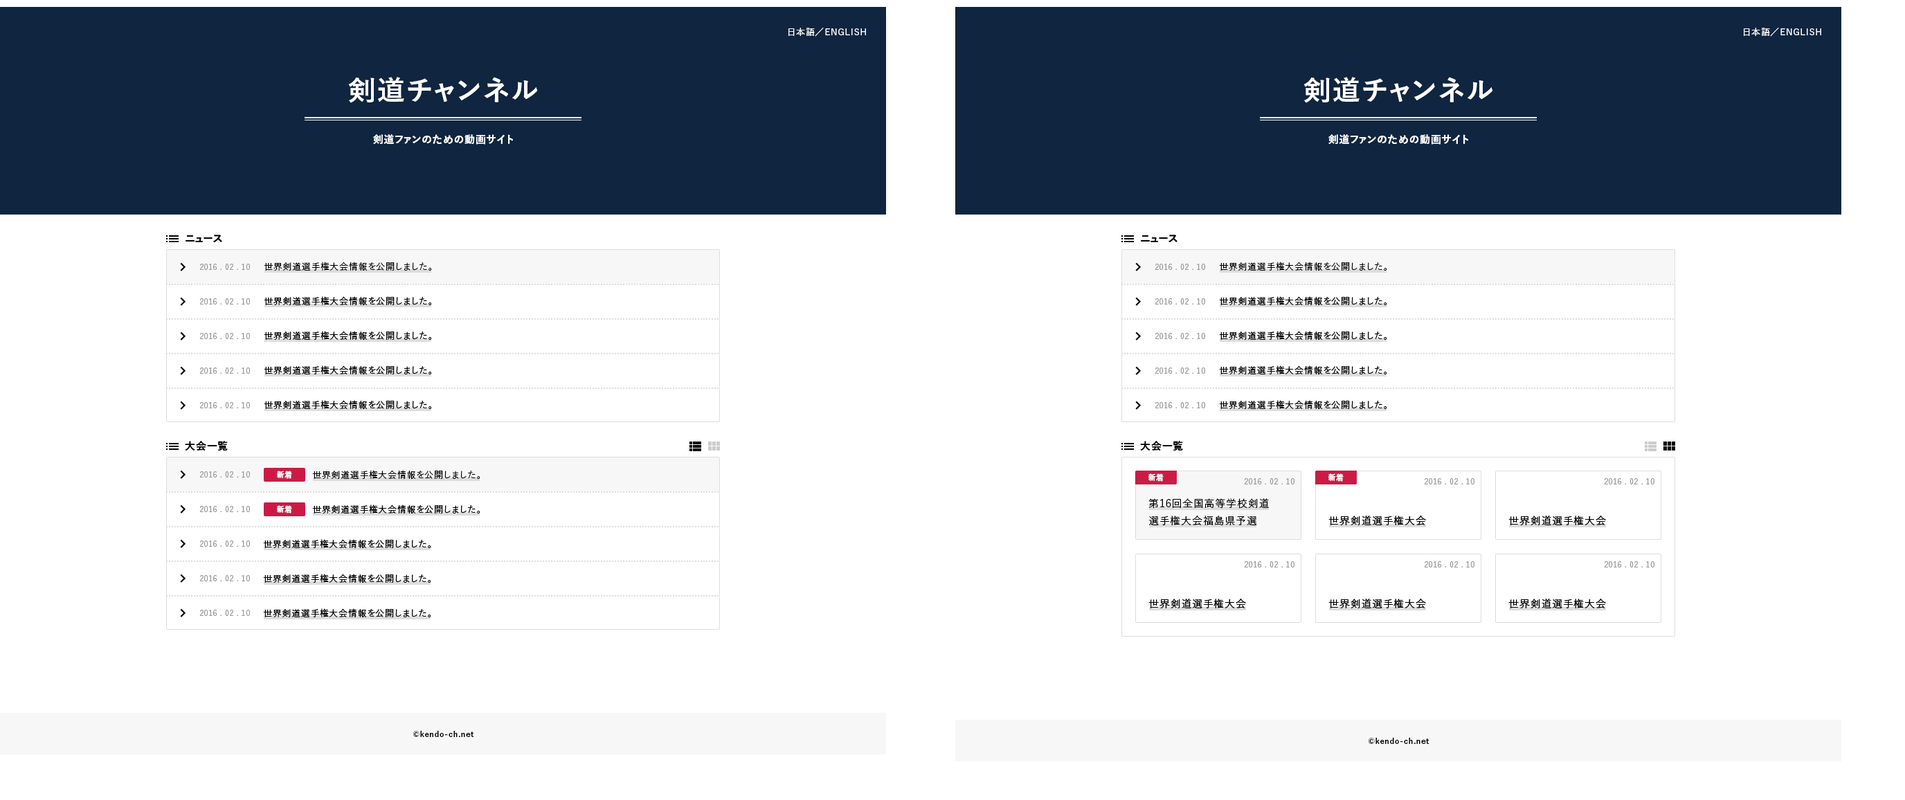
<style>
.page{position:relative;width:1905px;height:800px;background:#ffffff}
.page>*{position:absolute;margin:0}
.t1{font:9px "YuGo-Medium";letter-spacing:0.05em;color:#ffffff}
.t2{font:27.7px "YuGo-Bold";letter-spacing:0.05em;color:#ffffff}
.t3{font:10.4px "YuGo-Bold";letter-spacing:0.05em;color:#ffffff}
.t4{font:10.4px "YuGo-Bold";letter-spacing:0.05em;color:#000000}
.t5{font:7.6px "YuGo-Medium";letter-spacing:0.05em;color:#999999}
.t6{font:9px "YuGo-Medium";letter-spacing:0.05em;color:#000000}
.t7{font:7.6px "YuGo-Bold";letter-spacing:0.05em;color:#ffffff}
.t8{font:10.4px/17.3px "YuGo-Medium";letter-spacing:0.05em;color:#000000}
.t9{font:10.4px "YuGo-Medium";letter-spacing:0.05em;color:#000000}
.t10{font:7.6px "YuGo-Bold";letter-spacing:0.05em;color:#000000}
</style>
<div class="page">
<p class="t1" style="left:789px;top:28px;width:77px;height:9px">日本語／ENGLISH</p>
<p class="t1" style="left:1744px;top:28px;width:77px;height:9px">日本語／ENGLISH</p>
<p class="t2" style="left:348px;top:77px;width:190px;height:26px">剣道チャンネル</p>
<p class="t2" style="left:1304px;top:77px;width:189px;height:26px">剣道チャンネル</p>
<p class="t3" style="left:373px;top:134px;width:140px;height:11px">剣道ファンのための動画サイト</p>
<p class="t3" style="left:1329px;top:134px;width:139px;height:11px">剣道ファンのための動画サイト</p>
<p class="t4" style="left:186px;top:235px;width:36px;height:7px">ニュース</p>
<p class="t4" style="left:1141px;top:235px;width:37px;height:7px">ニュース</p>
<p class="t5" style="left:199px;top:264px;width:51px;height:6px">2016 . 02 . 10</p>
<p class="t6" style="left:264px;top:262px;width:168px;height:9px">世界剣道選手権大会情報を公開しました。</p>
<p class="t5" style="left:1155px;top:264px;width:50px;height:6px">2016 . 02 . 10</p>
<p class="t6" style="left:1219px;top:262px;width:168px;height:9px">世界剣道選手権大会情報を公開しました。</p>
<p class="t5" style="left:199px;top:298px;width:51px;height:7px">2016 . 02 . 10</p>
<p class="t6" style="left:264px;top:296px;width:168px;height:9px">世界剣道選手権大会情報を公開しました。</p>
<p class="t5" style="left:1155px;top:298px;width:50px;height:7px">2016 . 02 . 10</p>
<p class="t6" style="left:1219px;top:296px;width:168px;height:9px">世界剣道選手権大会情報を公開しました。</p>
<p class="t5" style="left:199px;top:333px;width:51px;height:6px">2016 . 02 . 10</p>
<p class="t6" style="left:264px;top:331px;width:168px;height:9px">世界剣道選手権大会情報を公開しました。</p>
<p class="t5" style="left:1155px;top:333px;width:50px;height:6px">2016 . 02 . 10</p>
<p class="t6" style="left:1219px;top:331px;width:168px;height:9px">世界剣道選手権大会情報を公開しました。</p>
<p class="t6" style="left:264px;top:366px;width:168px;height:9px">世界剣道選手権大会情報を公開しました。</p>
<p class="t6" style="left:1219px;top:366px;width:168px;height:9px">世界剣道選手権大会情報を公開しました。</p>
<p class="t5" style="left:199px;top:368px;width:51px;height:6px">2016 . 02 . 10</p>
<p class="t5" style="left:1155px;top:368px;width:50px;height:6px">2016 . 02 . 10</p>
<p class="t6" style="left:264px;top:400px;width:168px;height:9px">世界剣道選手権大会情報を公開しました。</p>
<p class="t6" style="left:1219px;top:400px;width:168px;height:9px">世界剣道選手権大会情報を公開しました。</p>
<p class="t5" style="left:199px;top:402px;width:51px;height:6px">2016 . 02 . 10</p>
<p class="t5" style="left:1155px;top:402px;width:50px;height:6px">2016 . 02 . 10</p>
<p class="t4" style="left:185px;top:441px;width:43px;height:10px">大会一覧</p>
<p class="t4" style="left:1140px;top:441px;width:43px;height:10px">大会一覧</p>
<p class="t5" style="left:199px;top:471px;width:51px;height:7px">2016 . 02 . 10</p>
<p class="t7" style="left:277px;top:471px;width:15px;height:8px">新着</p>
<p class="t6" style="left:312px;top:470px;width:168px;height:9px">世界剣道選手権大会情報を公開しました。</p>
<p class="t7" style="left:1149px;top:474px;width:15px;height:8px">新着</p>
<p class="t7" style="left:1329px;top:474px;width:15px;height:8px">新着</p>
<p class="t5" style="left:1244px;top:478px;width:51px;height:7px">2016 . 02 . 10</p>
<p class="t5" style="left:1424px;top:478px;width:51px;height:7px">2016 . 02 . 10</p>
<p class="t5" style="left:1604px;top:478px;width:51px;height:7px">2016 . 02 . 10</p>
<p class="t5" style="left:199px;top:506px;width:51px;height:6px">2016 . 02 . 10</p>
<p class="t7" style="left:277px;top:505px;width:15px;height:9px">新着</p>
<p class="t6" style="left:312px;top:505px;width:168px;height:9px">世界剣道選手権大会情報を公開しました。</p>
<p class="t8" style="left:1149px;top:498px;width:121px;height:27px">第16回全国高等学校剣道<br>選手権大会福島県予選</p>
<p class="t9" style="left:1329px;top:516px;width:97px;height:9px">世界剣道選手権大会</p>
<p class="t9" style="left:1509px;top:516px;width:97px;height:9px">世界剣道選手権大会</p>
<p class="t5" style="left:199px;top:541px;width:51px;height:6px">2016 . 02 . 10</p>
<p class="t6" style="left:263px;top:539px;width:168px;height:9px">世界剣道選手権大会情報を公開しました。</p>
<p class="t5" style="left:1244px;top:561px;width:51px;height:7px">2016 . 02 . 10</p>
<p class="t5" style="left:1424px;top:561px;width:51px;height:7px">2016 . 02 . 10</p>
<p class="t5" style="left:1604px;top:561px;width:51px;height:7px">2016 . 02 . 10</p>
<p class="t5" style="left:199px;top:575px;width:51px;height:7px">2016 . 02 . 10</p>
<p class="t6" style="left:263px;top:574px;width:168px;height:9px">世界剣道選手権大会情報を公開しました。</p>
<p class="t9" style="left:1149px;top:599px;width:97px;height:10px">世界剣道選手権大会</p>
<p class="t9" style="left:1329px;top:599px;width:97px;height:10px">世界剣道選手権大会</p>
<p class="t9" style="left:1509px;top:599px;width:97px;height:10px">世界剣道選手権大会</p>
<p class="t5" style="left:199px;top:610px;width:51px;height:6px">2016 . 02 . 10</p>
<p class="t6" style="left:263px;top:609px;width:168px;height:9px">世界剣道選手権大会情報を公開しました。</p>
<p class="t10" style="left:413px;top:731px;width:61px;height:6px">©kendo-ch.net</p>
<p class="t10" style="left:1369px;top:738px;width:60px;height:6px">©kendo-ch.net</p>
</div>
